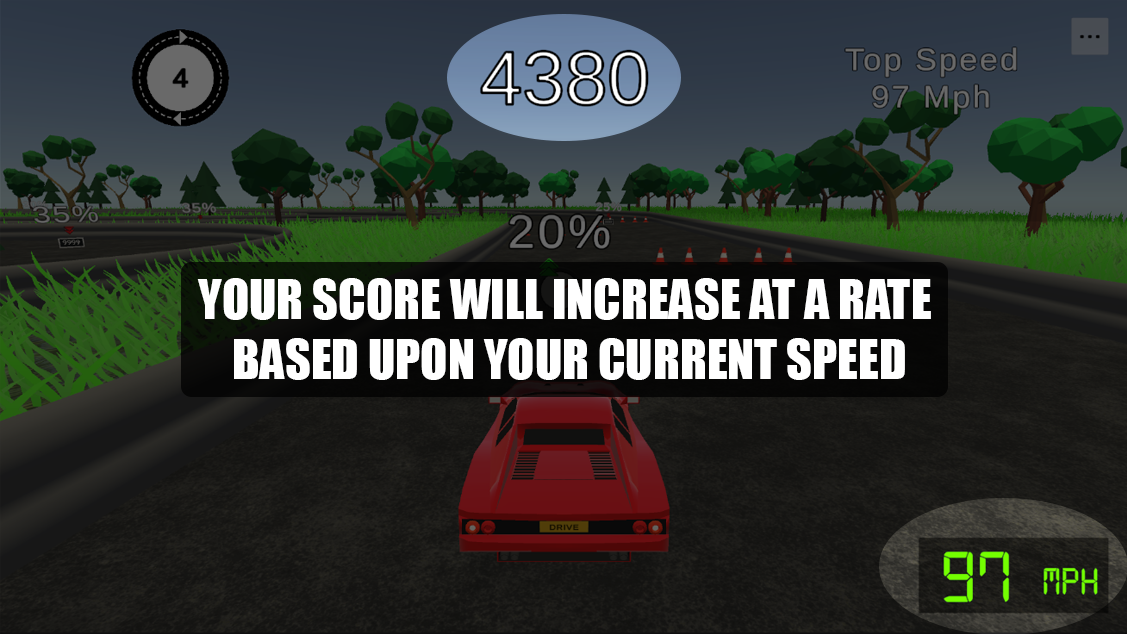
<style>
.page{position:relative;width:1127px;height:634px}
.page>*{position:absolute;margin:0}
.t1{font:50px "Impact";color:#ffffff;text-transform:uppercase}
</style>
<div class="page">
<p class="t1" style="left:197px;top:278px;width:734px;height:102px;text-align:center">Your score will increase at a rate <br>based upon your current speed</p>
</div>
